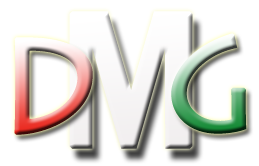
<style>
.page{position:relative;width:259px;height:166px;background:#ffffff}
.page>*{position:absolute;margin:0}
.t1{font:132px "LithosPro-Regular";letter-spacing:-0.005em;font-weight:bold;scale:0.91 1}
</style>
<div class="page">
<p class="t1" style="left:14px;top:37px;width:79px;height:98px">D</p>
<p class="t1" style="left:171px;top:33px;width:76px;height:101px">G</p>
</div>
